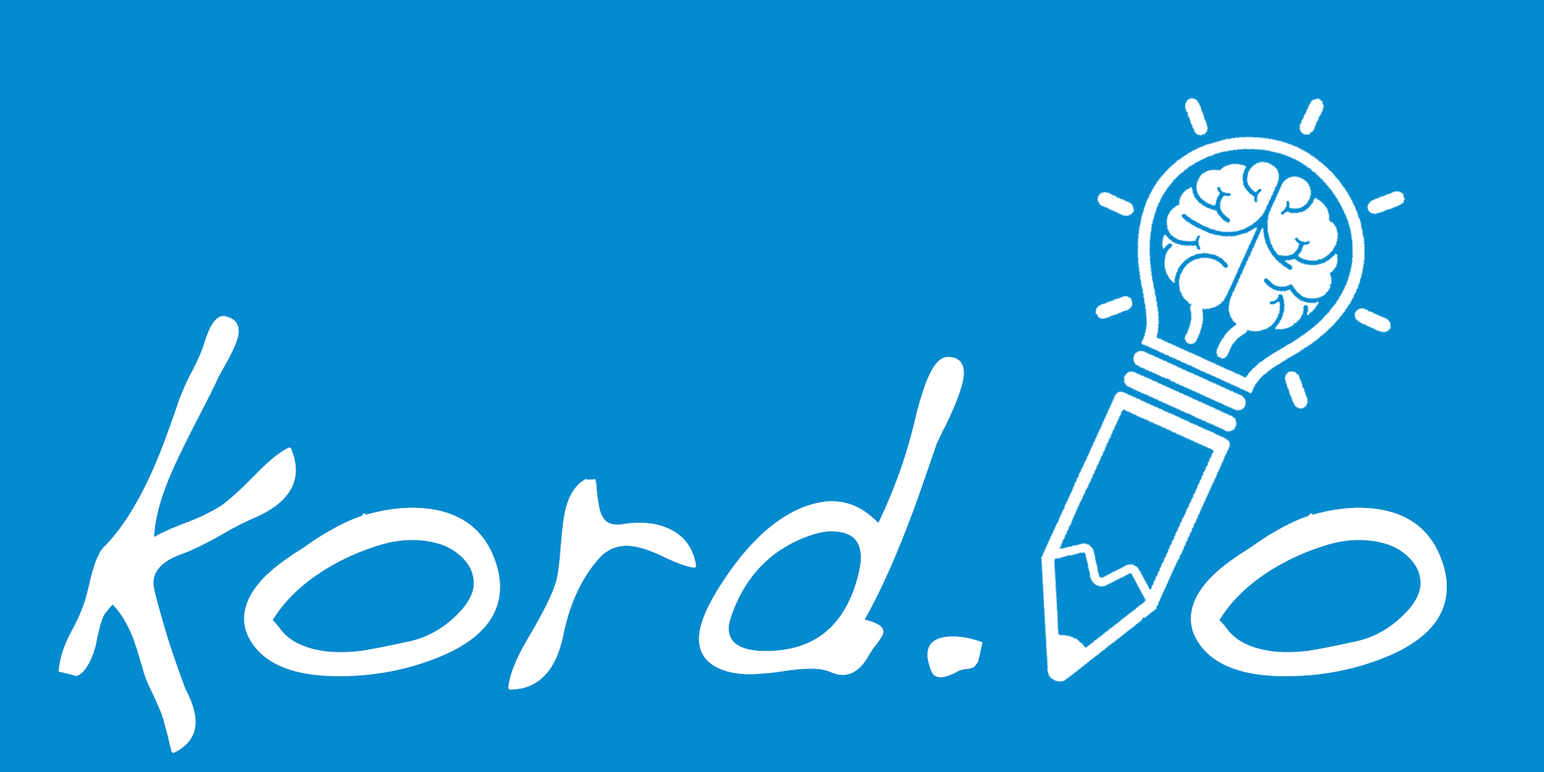
<style>
.page{position:relative;width:1544px;height:772px;background:#038acf}
.page>*{position:absolute;margin:0}
.t1{font:384.5px "Dakota";letter-spacing:-0.05em;color:#ffffff;font-weight:bold;scale:0.89 1}
</style>
<div class="page">
<p class="t1" style="left:59px;top:316px;width:1388px;height:438px">kord. o</p>
</div>
